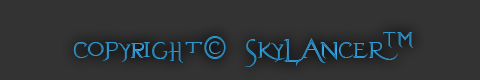
<style>
.page{position:relative;width:480px;height:80px;background:#333333}
.page>*{position:absolute;margin:0}
.t1{font:40px "Evanescent";color:#2d90c7}
.t2{font:32px "Evanescent";color:#2d90c7}
</style>
<div class="page">
<p class="t1" style="left:73px;top:32px;width:340px;height:35px">Copyright<span class="t2">© </span> SkyLanceR™</p>
</div>
